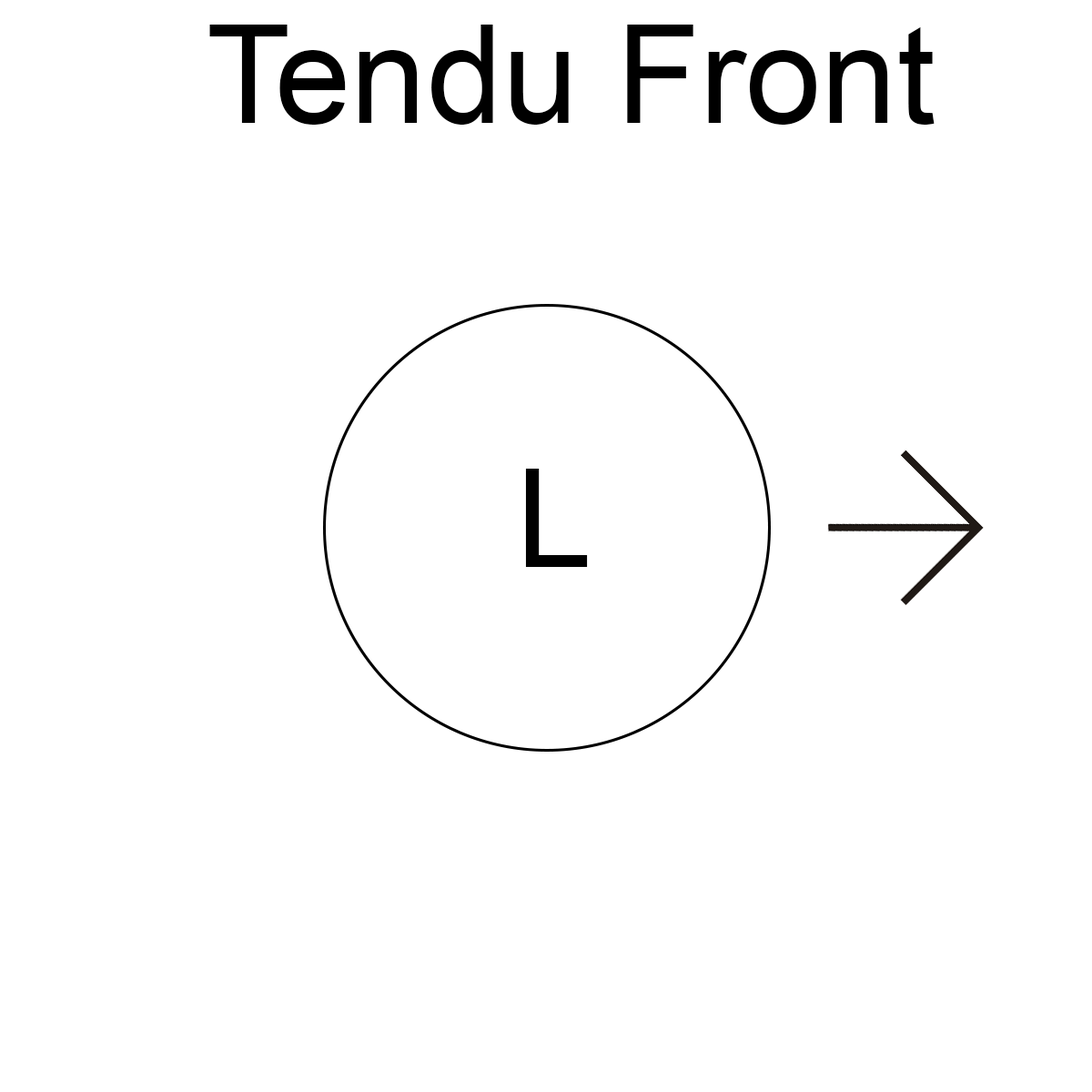
<style>
.page{position:relative;width:1092px;height:1092px;background:#ffffff}
.page>*{position:absolute;margin:0}
.t1{font:136.5px "ArialMT";color:#000000}
</style>
<div class="page">
<p class="t1" style="left:209px;top:25px;width:726px;height:100px">Tendu Front</p>
<p class="t1" style="left:525px;top:469px;width:63px;height:98px">L</p>
</div>
